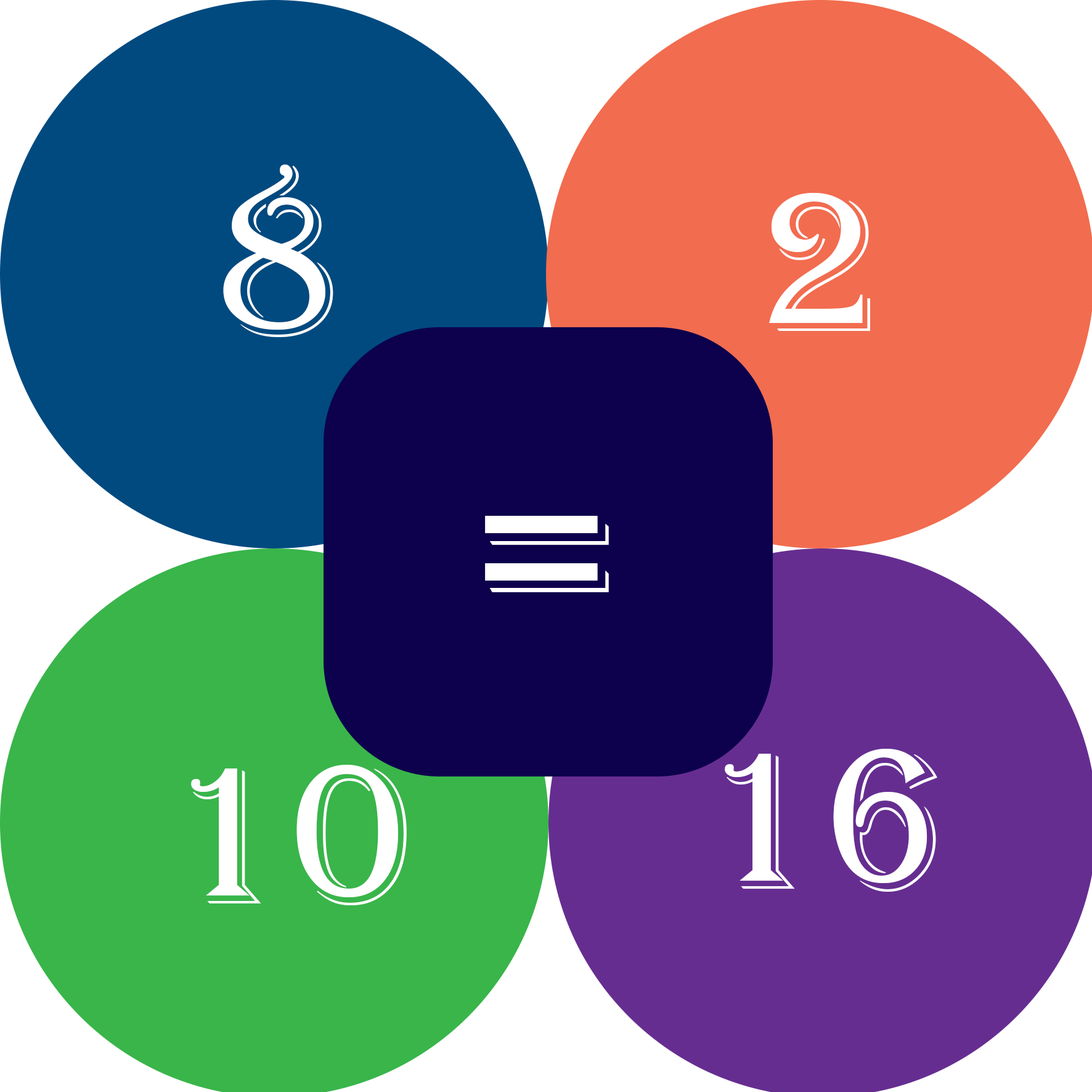
<style>
.page{position:relative;width:1092px;height:1092px}
.page>*{position:absolute;margin:0}
.t1{font:205.4px "Algerian";color:#ffffff}
.t2{font:282.4px "Algerian";color:#ffffff}
</style>
<div class="page">
<p class="t1" style="left:223px;top:165px;width:110px;height:172px">8</p>
<p class="t1" style="left:769px;top:193px;width:101px;height:138px">2</p>
<p class="t2" style="left:485px;top:516px;width:124px;height:76px">=</p>
<p class="t1" style="left:725px;top:749px;width:212px;height:143px">16</p>
<p class="t1" style="left:191px;top:765px;width:216px;height:140px">10</p>
</div>
